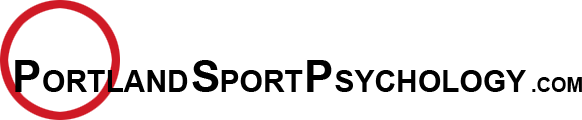
<style>
.page{position:relative;width:582px;height:120px;background:#ffffff}
.page>*{position:absolute;margin:0}
.t1{font:44px "Arial-BoldMT";color:#000000}
.t2{font:30px "Arial-BoldMT";color:#000000}
.t3{font:20px "Arial-BoldMT";color:#000000}
</style>
<div class="page">
<p class="t1" style="left:15px;top:60px;width:25px;height:32px">P</p>
<p class="t1" style="left:192px;top:60px;width:27px;height:32px">S</p>
<p class="t1" style="left:307px;top:60px;width:25px;height:32px">P</p>
<p class="t2" style="left:43px;top:70px;width:145px;height:22px">ORTLAND</p>
<p class="t2" style="left:221px;top:70px;width:82px;height:22px">PORT</p>
<p class="t2" style="left:335px;top:70px;width:191px;height:22px">SYCHOLOGY</p>
<p class="t3" style="left:532px;top:77px;width:50px;height:15px">.COM</p>
</div>
